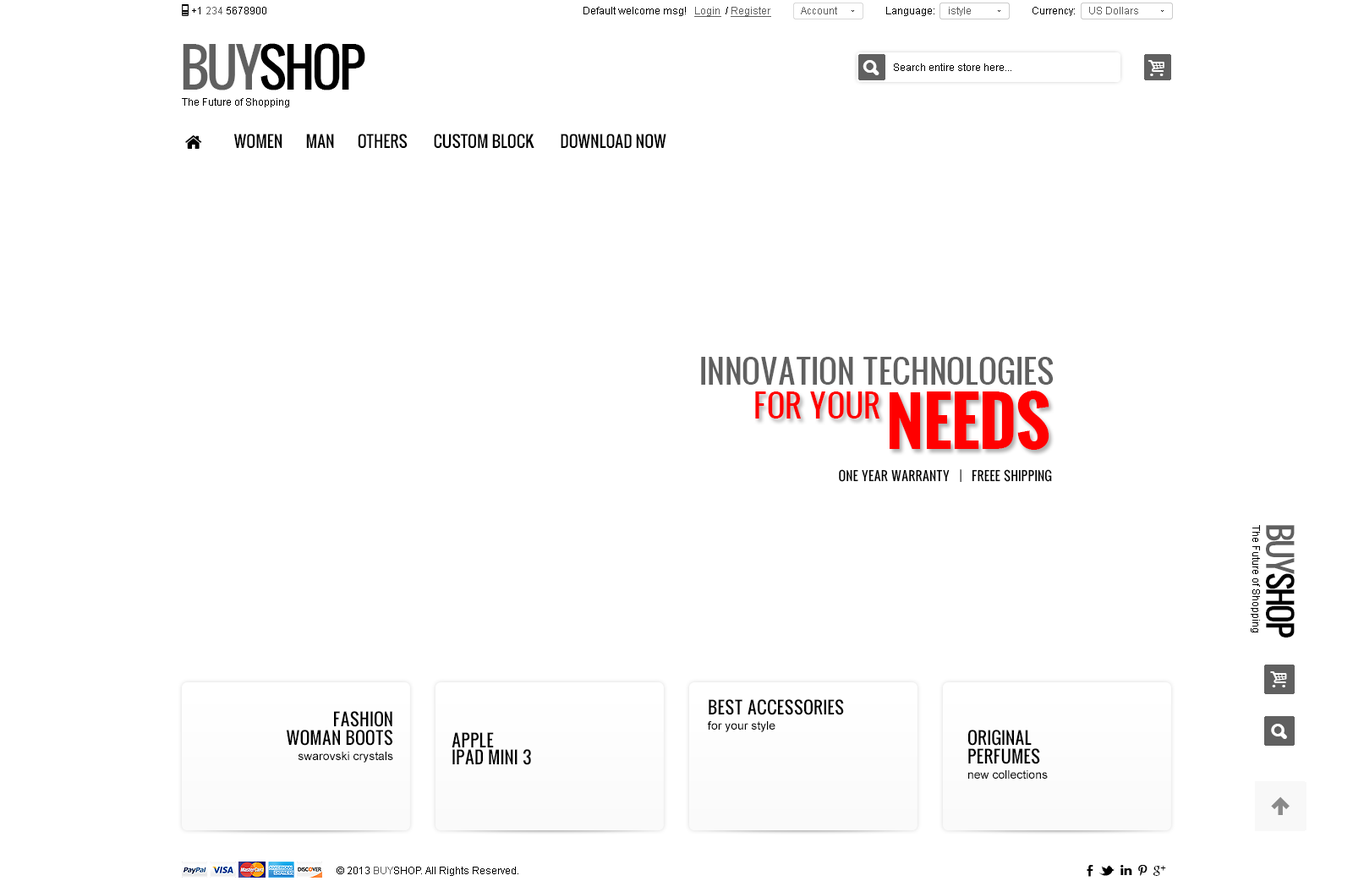
<style>
.page{position:relative;width:1353px;height:881px;background:#ffffff}
.page>*{position:absolute;margin:0}
.t1{font:10.1px "ArialMT";color:#000000}
.t2{font:10.1px "ArialMT";color:#606060}
.t3{font:10.1px "ArialMT";color:#606060;text-decoration:underline}
.t4{font:51.6px "Oswald";letter-spacing:-0.05em;color:#000000;text-transform:uppercase}
.t5{font:51.6px "Oswald";letter-spacing:-0.05em;color:#606060;text-transform:uppercase}
.t6{font:31.1px "Oswald";color:#606060;text-transform:uppercase}
.t7{font:30.3px "Oswald";color:#ff0000;text-transform:uppercase}
.t8{font:65px "Oswald-Bold";color:#ff0000;text-transform:uppercase}
.t9{font:12.5px "Oswald";color:#010101;text-transform:uppercase}
.t10{font:32.1px "Oswald";letter-spacing:-0.06em;color:#000000;text-transform:uppercase}
.t11{font:32.1px "Oswald";letter-spacing:-0.06em;color:#606060;text-transform:uppercase}
.t12{font:16.9px/18.6px "Oswald";color:#000000;text-transform:uppercase}
.t13{font:11.8px/15.2px "ArialMT";color:#000000}
.t14{font:16.9px/16.9px "Oswald";color:#000000;text-transform:uppercase}
</style>
<div class="page">
<p class="t1" style="left:192px;top:7px;width:74px;height:7px">+1 <span class="t2">234 </span>5678900</p>
<p class="t1" style="left:584px;top:7px;width:187px;height:10px">Default welcome msg!   <span class="t3">Login</span>  / <span class="t3">Register</span></p>
<p class="t2" style="left:801px;top:7px;width:36px;height:7px">Account</p>
<p class="t1" style="left:886px;top:7px;width:85px;height:9px">Language:     <span class="t2">istyle</span></p>
<p class="t2" style="left:1033px;top:7px;width:105px;height:9px"><span class="t1">Currency:     </span>US Dollars</p>
<p class="t4" style="left:183px;top:43px;width:182px;height:47px"><span class="t5">buy</span>shop</p>
<p class="t1" style="left:894px;top:63px;width:117px;height:8px">Search entire store here...</p>
<p class="t1" style="left:182px;top:98px;width:107px;height:9px">The Future of Shopping</p>
<p class="t6" style="left:701px;top:357px;width:353px;height:28px">INNOVATION TECHNOLOGIES</p>
<p class="t7" style="left:755px;top:392px;width:125px;height:27px">FOR YOUR</p>
<p class="t8" style="left:890px;top:391px;width:160px;height:59px">NEEDS</p>
<p class="t9" style="left:839px;top:469px;width:213px;height:13px">ONE YEAR WARRANTY   |   FREEE SHIPPING</p>
<p class="t1" style="left:1251px;top:525px;width:9px;height:108px;rotate:90deg">The Future of Shopping</p>
<p class="t10" style="left:1266px;top:525px;width:29px;height:113px;rotate:90deg"><span class="t11">buy</span>shop</p>
<p class="t12" style="left:708px;top:699px;width:136px;height:33px">best ACCESSORIES<br><span class="t13">for your style</span></p>
<p class="t12" style="left:287px;top:711px;width:106px;height:52px;text-align:right">Fashion<br>Woman boots<br><span class="t13">swarovski crystals</span></p>
<p class="t14" style="left:452px;top:732px;width:79px;height:33px">APPLE <br>ipad mini 3</p>
<p class="t12" style="left:968px;top:730px;width:80px;height:49px">ORIGINAL<br>PERFUMES<br><span class="t13">new collections</span></p>
<p class="t1" style="left:337px;top:867px;width:181px;height:9px">© 2013 <span class="t2">BUY</span>SHOP. All Rights Reserved.</p>
</div>
